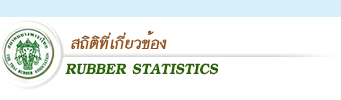
<style>
.page{position:relative;width:341px;height:100px;background:#ffffff}
.page>*{position:absolute;margin:0}
.t1{font:23px "PSLPrathomSP";letter-spacing:-0.01em;color:#975215;font-weight:bold;font-style:italic}
.t2{font:22px "JSAngsumalin";color:#2a6400;text-transform:uppercase;font-style:italic}
</style>
<div class="page">
<p class="t1" style="left:71px;top:30px;width:96px;height:19px">สถิติที่เกี่ยวข้อง</p>
<p class="t2" style="left:65px;top:63px;width:153px;height:12px">RUBBER STATISTICS</p>
</div>
